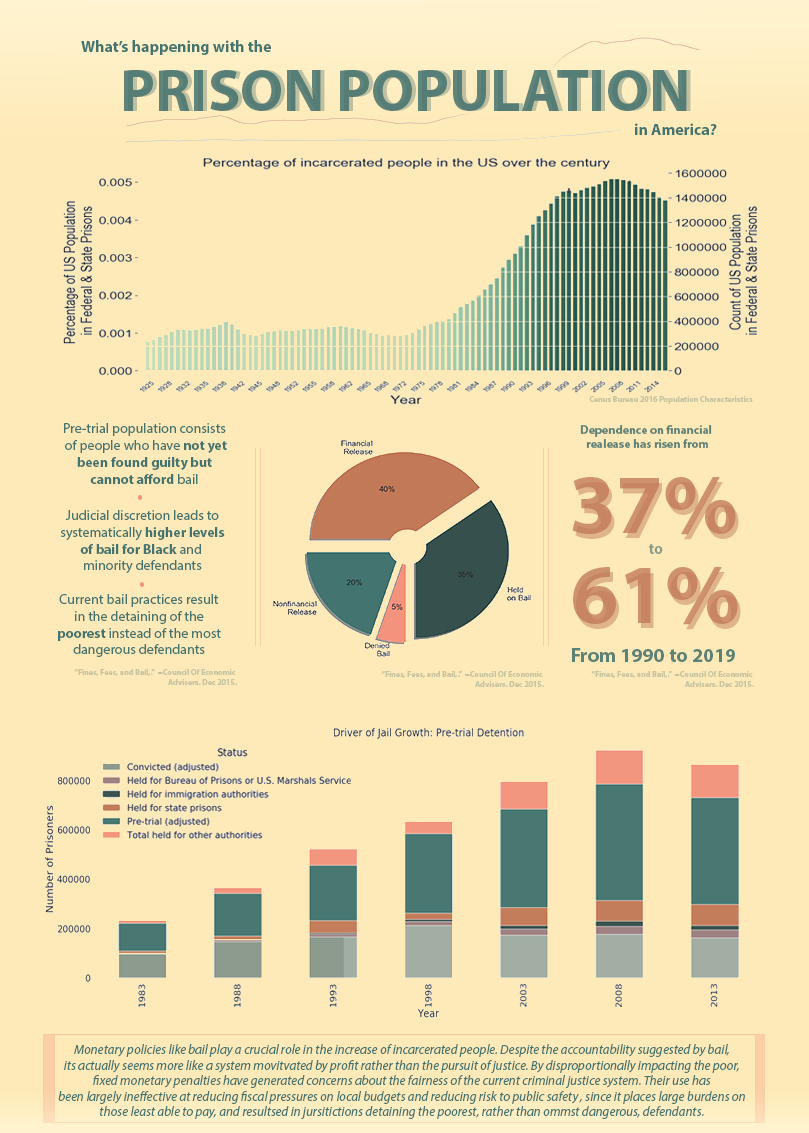
<style>
.page{position:relative;width:809px;height:1133px;background:#feeab8}
.page>*{position:absolute;margin:0}
.t1{font:16px "MyriadPro-Bold";color:#437470}
.t2{font:60px "MyriadPro-Bold";color:#437470}
.t3{font:8px "MyriadPro-Bold";color:#c7c4a0}
.t4{font:14px "MyriadPro-Regular";color:#437470}
.t5{font:14px "MyriadPro-Bold";color:#437470}
.t6{font:12px "MyriadPro-Bold";color:#5c8177}
.t7{font:85px "MyriadPro-Bold";color:#c88664}
.t8{font:85px "MyriadPro-Bold"}
.t9{font:15px "MyriadPro-Bold";color:#899c87}
.t10{font:85px "MyriadPro-Bold";color:#c27958}
.t11{font:20px "MyriadPro-Bold";color:#5c8177}
.t12{font:13px "MyriadPro-It";color:#437470}
</style>
<div class="page">
<p class="t1" style="left:81px;top:40px;width:190px;height:15px">What’s happening with the</p>
<p class="t2" style="left:124px;top:70px;width:563px;height:41px">PRISON POPULATION</p>
<p class="t2" style="left:128px;top:70px;width:563px;height:41px">PRISON POPULATION</p>
<p class="t1" style="left:635px;top:123px;width:82px;height:12px">in America?</p>
<p class="t3" style="left:589px;top:396px;width:164px;height:8px">Cenus Bureau 2016 Population Characteristics</p>
<p class="t4" style="left:64px;top:423px;width:163px;height:61px;text-align:center">Pre-trial population consists <br>of people who have <span class="t5">not yet<br>been found guilty but <br>cannot afford </span>bail</p>
<p class="t6" style="left:580px;top:425px;width:132px;height:23px;text-align:center">Dependence on financial <br>realease has risen from</p>
<p class="t7" style="left:572px;top:477px;width:164px;height:58px">37%</p>
<p class="t8" style="left:575px;top:482px;width:164px;height:58px">37%</p>
<p class="t4" style="left:60px;top:510px;width:165px;height:63px;text-align:center">Judicial discretion leads to<br>systematically <span class="t5">higher levels<br>of bail for Black</span> and <br>minority defendants</p>
<p class="t9" style="left:649px;top:544px;width:14px;height:10px">to</p>
<p class="t10" style="left:573px;top:567px;width:165px;height:58px">61%</p>
<p class="t8" style="left:576px;top:572px;width:165px;height:58px">61%</p>
<p class="t4" style="left:58px;top:594px;width:163px;height:63px;text-align:center">Current bail practices result<br>in the detaining of the<br><span class="t5">poorest </span>instead of the most<br>dangerous defendants</p>
<p class="t11" style="left:572px;top:648px;width:163px;height:14px">From 1990 to 2019</p>
<p class="t3" style="left:74px;top:669px;width:163px;height:16px;text-align:right">“Fines, Fees, and Bail,.”  =Council Of Economic <br>Advisers. Dec 2015.</p>
<p class="t3" style="left:381px;top:671px;width:163px;height:16px;text-align:right">“Fines, Fees, and Bail,.”  =Council Of Economic <br>Advisers. Dec 2015.</p>
<p class="t3" style="left:591px;top:671px;width:163px;height:16px;text-align:right">“Fines, Fees, and Bail,.”  =Council Of Economic <br>Advisers. Dec 2015.</p>
<p class="t12" style="left:58px;top:1044px;width:687px;height:75px;text-align:center">Monetary policies like bail play a crucial role in the increase of incarcerated people. Despite the accountability suggested by bail, <br>its actually seems more like a system movitvated by profit rather than the pursuit of justice. By disproportionally impacting the poor, <br>fixed monetary penalties have generated concerns about the fairness of the current criminal justice system. Their use has <br>been largely ineffective at reducing fiscal pressures on local budgets and reducing risk to public safety , since it places large burdens on <br>those least able to pay, and resultsed in jursitictions detaining the poorest, rather than ommst dangerous, defendants.</p>
</div>
